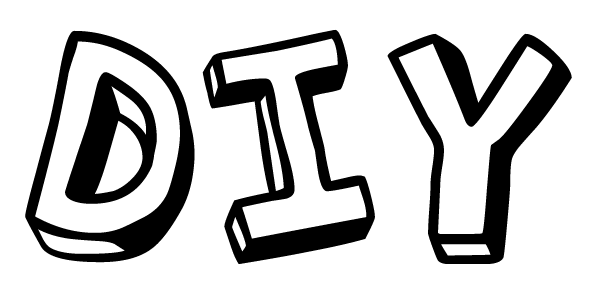
<style>
.page{position:relative;width:596px;height:304px;background:#ffffff}
.page>*{position:absolute;margin:0}
.t1{font:300px "ActionJackson";color:#000000}
</style>
<div class="page">
<p class="t1" style="left:25px;top:29px;width:547px;height:235px">DIY</p>
</div>
